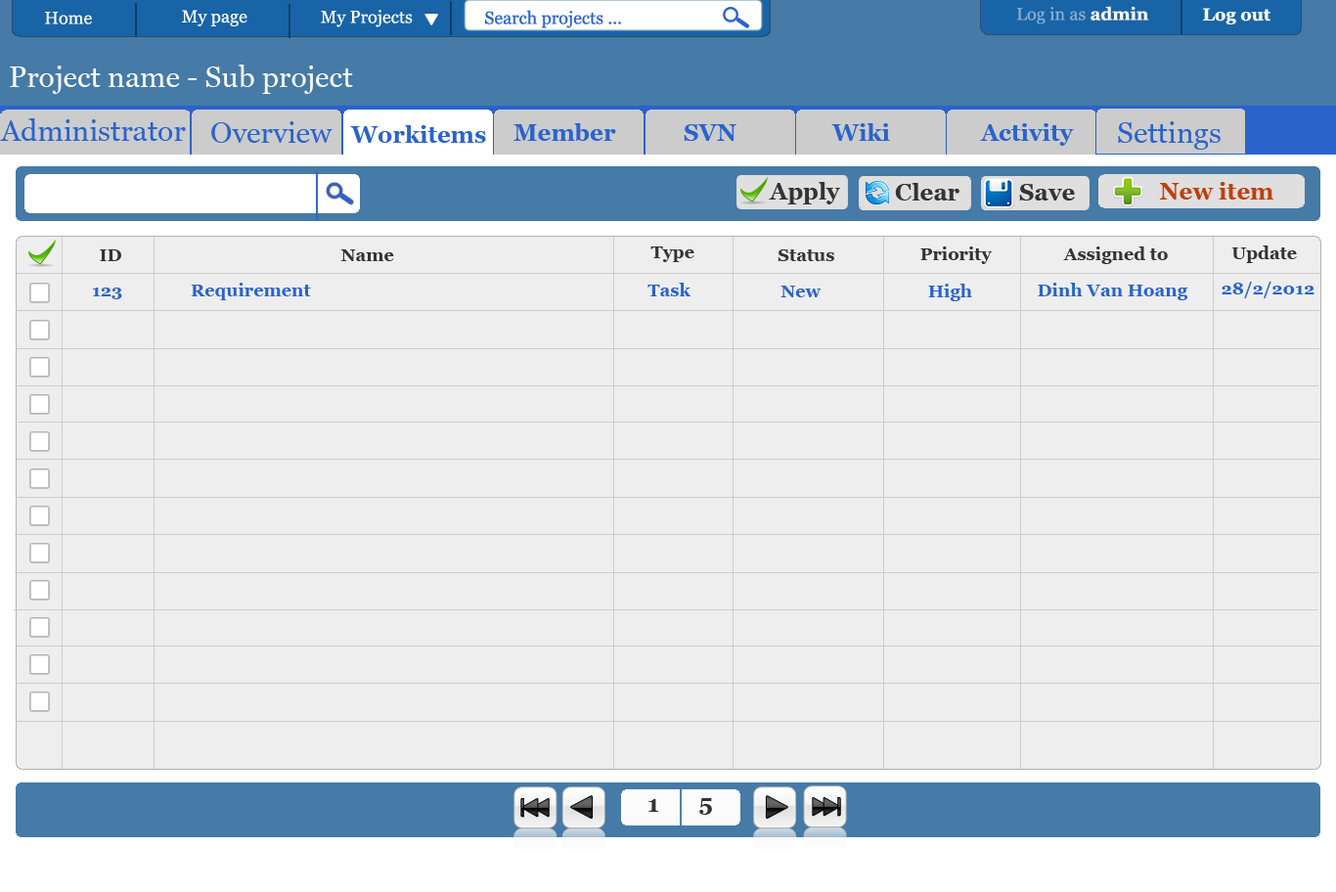
<style>
.page{position:relative;width:1336px;height:892px;background:#eeeeee}
.page>*{position:absolute;margin:0}
.t1{font:17.6px "Vani";color:#85add0}
.t2{font:17.6px "Vani-Bold";color:#ffffff}
.t3{font:17.6px "Vani";color:#ffffff}
.t4{font:17.6px "Vani";color:#2a63cc}
.t5{font:29.4px "Vani";color:#ffffff}
.t6{font:29.4px "Vani";color:#2a63cc}
.t7{font:23.5px "Vani-Bold";color:#2a63cc}
.t8{font:23.5px "Vani-Bold";color:#333333}
.t9{font:23.5px "Vani-Bold";color:#c33e09}
.t10{font:17.6px "Vani-Bold";color:#333333}
.t11{font:17.6px "Vani-Bold";color:#2a63cc}
</style>
<div class="page">
<p class="t1" style="left:1017px;top:6px;width:133px;height:18px">Log in as <span class="t2">admin</span></p>
<p class="t3" style="left:45px;top:12px;width:47px;height:12px">Home</p>
<p class="t3" style="left:182px;top:10px;width:66px;height:16px">My page</p>
<p class="t3" style="left:321px;top:10px;width:92px;height:17px">My Projects</p>
<p class="t4" style="left:485px;top:10px;width:136px;height:18px">Search projects ...</p>
<p class="t2" style="left:1203px;top:8px;width:68px;height:16px">Log out</p>
<p class="t5" style="left:10px;top:65px;width:343px;height:29px">Project name - Sub project</p>
<p class="t6" style="left:0px;top:118px;width:186px;height:23px">Administrator</p>
<p class="t6" style="left:211px;top:121px;width:122px;height:22px">Overview</p>
<p class="t7" style="left:350px;top:125px;width:136px;height:18px">Workitems</p>
<p class="t7" style="left:514px;top:123px;width:102px;height:18px">Member</p>
<p class="t7" style="left:684px;top:124px;width:53px;height:17px">SVN</p>
<p class="t7" style="left:832px;top:123px;width:58px;height:18px">Wiki</p>
<p class="t7" style="left:980px;top:123px;width:94px;height:23px">Activity</p>
<p class="t6" style="left:1118px;top:121px;width:103px;height:29px">Settings</p>
<p class="t8" style="left:769px;top:182px;width:71px;height:22px">Apply</p>
<p class="t8" style="left:895px;top:183px;width:65px;height:18px">Clear</p>
<p class="t8" style="left:1019px;top:184px;width:56px;height:17px">Save</p>
<p class="t9" style="left:1159px;top:182px;width:115px;height:18px">New item</p>
<p class="t10" style="left:1232px;top:246px;width:65px;height:17px">Update</p>
<p class="t10" style="left:100px;top:249px;width:21px;height:12px">ID</p>
<p class="t10" style="left:340px;top:249px;width:54px;height:12px">Name</p>
<p class="t10" style="left:651px;top:247px;width:44px;height:15px">Type</p>
<p class="t10" style="left:778px;top:249px;width:57px;height:12px">Status</p>
<p class="t10" style="left:921px;top:247px;width:71px;height:17px">Priority</p>
<p class="t10" style="left:1063px;top:247px;width:105px;height:17px">Assigned to</p>
<p class="t11" style="left:1222px;top:282px;width:93px;height:16px">28/2/2012</p>
<p class="t11" style="left:93px;top:288px;width:29px;height:11px">123</p>
<p class="t11" style="left:191px;top:283px;width:120px;height:17px">Requirement</p>
<p class="t11" style="left:648px;top:283px;width:44px;height:13px">Task</p>
<p class="t11" style="left:781px;top:286px;width:41px;height:11px">New</p>
<p class="t11" style="left:928px;top:284px;width:44px;height:17px">High</p>
<p class="t11" style="left:1038px;top:283px;width:151px;height:17px">Dinh Van Hoang</p>
<p class="t8" style="left:649px;top:799px;width:9px;height:13px">1</p>
<p class="t8" style="left:700px;top:798px;width:12px;height:17px">5</p>
</div>
